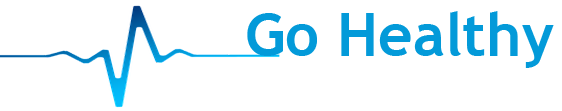
<style>
.page{position:relative;width:562px;height:111px;background:#ffffff}
.page>*{position:absolute;margin:0}
.t1{font:60px "TrebuchetMS-Bold";color:#039ad9}
</style>
<div class="page">
<p class="t1" style="left:247px;top:11px;width:307px;height:57px">Go Healthy</p>
</div>
